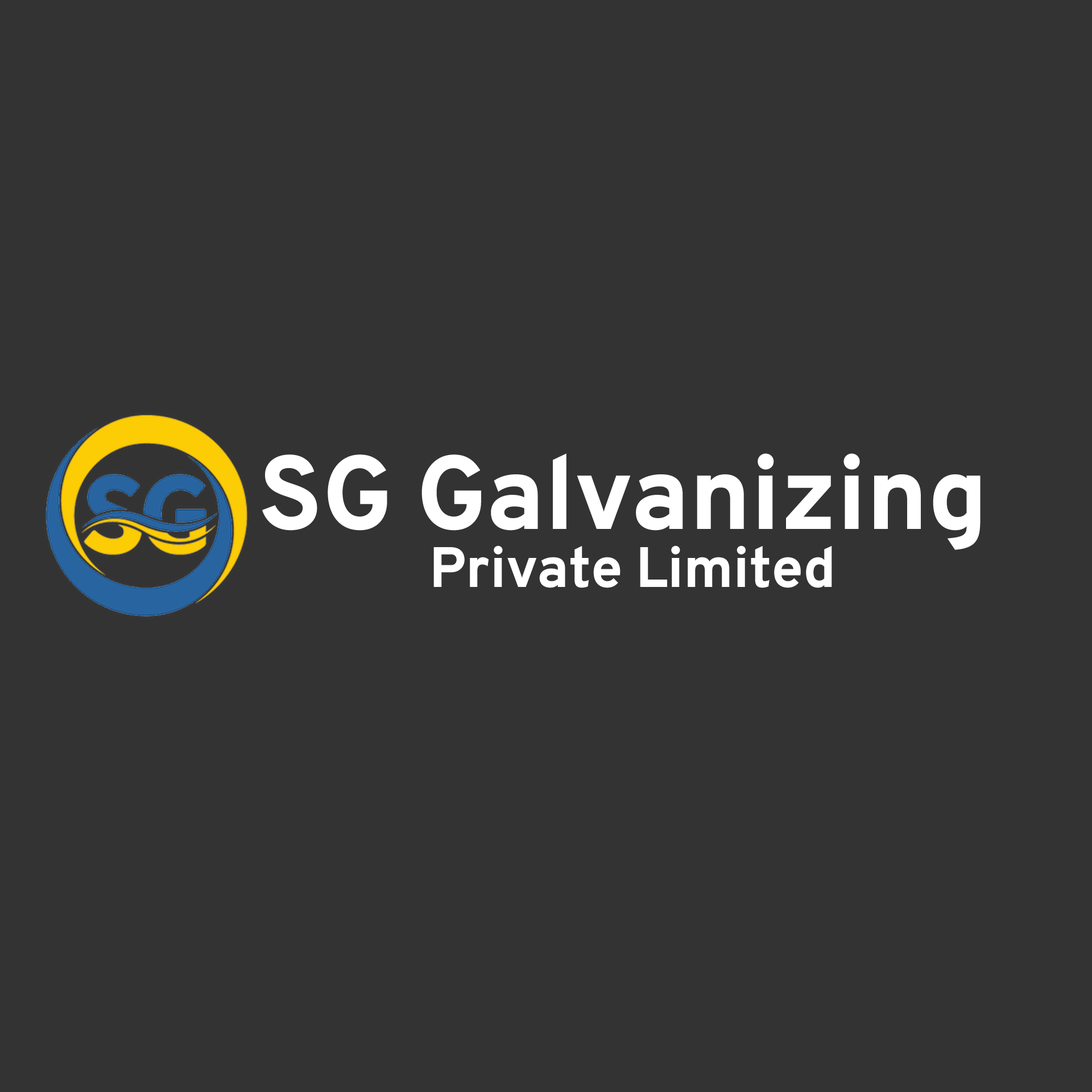
<style>
.page{position:relative;width:1092px;height:1092px;background:#333333}
.page>*{position:absolute;margin:0}
.t1{font:104.2px "Overpass-ExtraBold";color:#ffffff}
.t2{font:56.9px "Overpass-ExtraBold";color:#ffffff}
</style>
<div class="page">
<p class="t1" style="left:262px;top:453px;width:719px;height:97px">SG Galvanizing</p>
<p class="t2" style="left:433px;top:545px;width:399px;height:43px">Private Limited</p>
</div>
